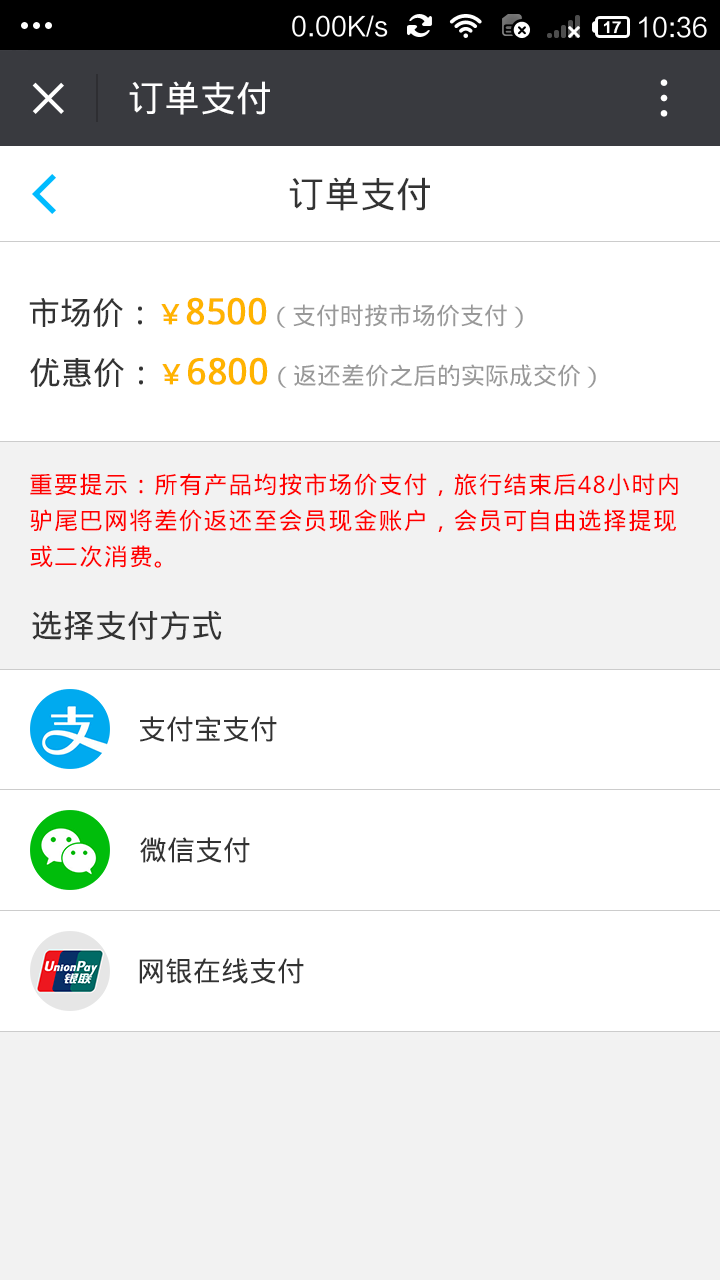
<style>
.page{position:relative;width:720px;height:1280px;background:#ffffff}
.page>*{position:absolute;margin:0}
.t1{font:36px "DroidSansFallback";color:#fefefe}
.t2{font:36px "DroidSansFallback";color:#333333}
.t3{font:24px "DroidSansFallback";color:#999999}
.t4{font:32px "DroidSansFallback";color:#333333}
.t5{font:28px "DroidSansFallback";color:#ffb300;font-weight:bold}
.t6{font:36px "DroidSansFallback";color:#ffb300;font-weight:bold}
.t7{font:24px/36px "DroidSansFallback";letter-spacing:0.04em;color:#ff0000}
.t8{font:28px "DroidSansFallback";color:#333333}
</style>
<div class="page">
<p class="t1" style="left:129px;top:81px;width:141px;height:34px">订单支付</p>
<p class="t2" style="left:289px;top:177px;width:141px;height:34px">订单支付</p>
<p class="t3" style="left:29px;top:297px;width:494px;height:31px"><span class="t4">市场价：</span><span class="t5">￥</span><span class="t6">8500</span>（支付时按市场价支付）</p>
<p class="t3" style="left:30px;top:357px;width:566px;height:31px"><span class="t4">优惠价：</span><span class="t5">￥</span><span class="t6">6800</span>（返还差价之后的实际成交价）</p>
<p class="t7" style="left:30px;top:473px;width:648px;height:95px">重要提示：所有产品均按市场价支付，旅行结束后48小时内<br>驴尾巴网将差价返还至会员现金账户，会员可自由选择提现<br>或二次消费。</p>
<p class="t4" style="left:32px;top:611px;width:190px;height:29px">选择支付方式</p>
<p class="t8" style="left:140px;top:716px;width:137px;height:26px">支付宝支付</p>
<p class="t8" style="left:140px;top:837px;width:110px;height:26px">微信支付</p>
<p class="t8" style="left:139px;top:958px;width:165px;height:26px">网银在线支付</p>
</div>
